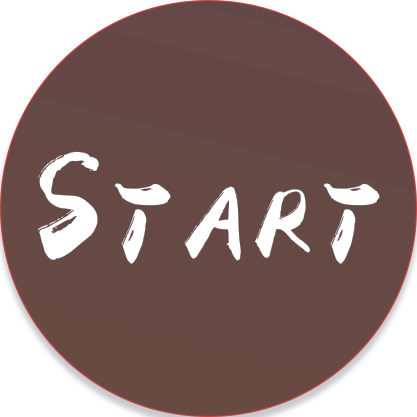
<style>
.page{position:relative;width:417px;height:417px;background:#ffffff}
.page>*{position:absolute;margin:0}
.t1{font:196.9px "YuWeiLiShuJT";color:#ffffff;font-variant:small-caps}
</style>
<div class="page">
<p class="t1" style="left:37px;top:151px;width:343px;height:113px">Start</p>
</div>
